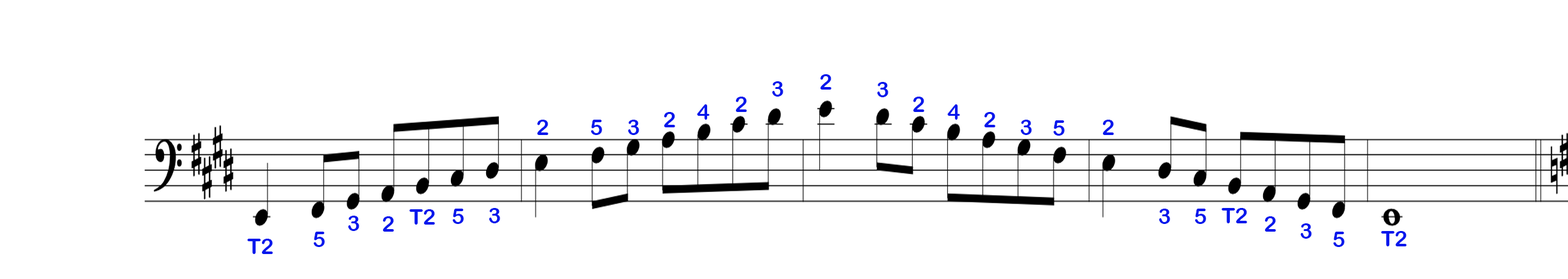
<style>
.page{position:relative;width:1568px;height:279px;background:#ffffff}
.page>*{position:absolute;margin:0}
.t1{font:21.8px "ArialRoundedMTBold";color:#0417ec}
</style>
<div class="page">
<p class="t1" style="left:820px;top:74px;width:11px;height:16px">2</p>
<p class="t1" style="left:772px;top:81px;width:11px;height:16px">3</p>
<p class="t1" style="left:877px;top:82px;width:11px;height:15px">3</p>
<p class="t1" style="left:735px;top:97px;width:12px;height:15px">2</p>
<p class="t1" style="left:913px;top:97px;width:11px;height:15px">2</p>
<p class="t1" style="left:664px;top:112px;width:11px;height:15px">2</p>
<p class="t1" style="left:697px;top:104px;width:13px;height:16px">4</p>
<p class="t1" style="left:947px;top:104px;width:13px;height:16px">4</p>
<p class="t1" style="left:984px;top:112px;width:11px;height:15px">2</p>
<p class="t1" style="left:537px;top:120px;width:11px;height:15px">2</p>
<p class="t1" style="left:591px;top:120px;width:11px;height:15px">5</p>
<p class="t1" style="left:628px;top:120px;width:11px;height:15px">3</p>
<p class="t1" style="left:1020px;top:120px;width:12px;height:15px">3</p>
<p class="t1" style="left:1053px;top:120px;width:12px;height:16px">5</p>
<p class="t1" style="left:1102px;top:120px;width:12px;height:15px">2</p>
<p class="t1" style="left:409px;top:209px;width:26px;height:16px">T2</p>
<p class="t1" style="left:452px;top:209px;width:12px;height:15px">5</p>
<p class="t1" style="left:489px;top:208px;width:11px;height:16px">3</p>
<p class="t1" style="left:1159px;top:209px;width:11px;height:15px">3</p>
<p class="t1" style="left:1195px;top:209px;width:11px;height:15px">5</p>
<p class="t1" style="left:1221px;top:208px;width:26px;height:16px">T2</p>
<p class="t1" style="left:348px;top:216px;width:11px;height:15px">3</p>
<p class="t1" style="left:382px;top:216px;width:12px;height:16px">2</p>
<p class="t1" style="left:1264px;top:216px;width:12px;height:16px">2</p>
<p class="t1" style="left:313px;top:232px;width:12px;height:15px">5</p>
<p class="t1" style="left:1300px;top:224px;width:12px;height:15px">3</p>
<p class="t1" style="left:1333px;top:232px;width:11px;height:15px">5</p>
<p class="t1" style="left:1381px;top:231px;width:26px;height:16px">T2</p>
<p class="t1" style="left:247px;top:239px;width:26px;height:15px">T2</p>
</div>
